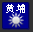
<style>
.page{position:relative;width:33px;height:32px;background:#000090}
.page>*{position:absolute;margin:0}
.t1{font:10.4px "SimSun";color:#ffffff}
</style>
<div class="page">
<p class="t1" style="left:6px;top:4px;width:19px;height:9px">黄埔</p>
</div>
